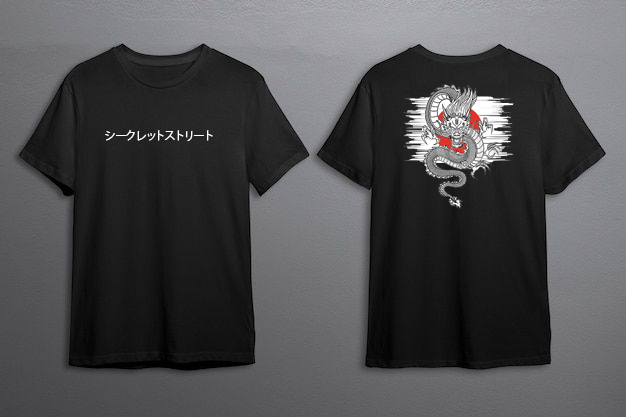
<style>
.page{position:relative;width:626px;height:417px}
.page>*{position:absolute;margin:0}
.t1{font:11.4px "KozGoPr6N-Regular";color:#ffffff}
</style>
<div class="page">
<p class="t1" style="left:105px;top:130px;width:108px;height:11px">シークレットストリート</p>
</div>
